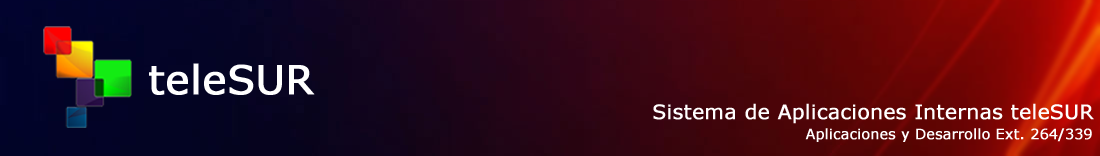
<style>
.page{position:relative;width:1100px;height:156px}
.page>*{position:absolute;margin:0}
.t1{font:40px "Verdana";color:#ffffff;font-weight:bold}
.t2{font:20px "Verdana";color:#ffffff;font-weight:bold}
.t3{font:14px "Verdana";color:#ffffff;font-weight:bold}
</style>
<div class="page">
<p class="t1" style="left:149px;top:63px;width:166px;height:32px">teleSUR</p>
<p class="t2" style="left:653px;top:103px;width:441px;height:21px">Sistema de Aplicaciones Internas teleSUR</p>
<p class="t3" style="left:805px;top:128px;width:287px;height:14px">Aplicaciones y Desarrollo Ext. 264/339</p>
</div>
